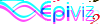
<style>
.page{position:relative;width:100px;height:24px;background:#ffffff}
.page>*{position:absolute;margin:0}
.t1{font:23.1px "BauhausITCbyBT-Medium";scale:1.05 1}
.t2{font:23.1px "BauhausITCbyBT-Light";scale:1.05 1}
</style>
<div class="page">
<p class="t1" style="left:40px;top:1px;width:54px;height:21px">Epi<span class="t2">viz</span></p>
</div>
